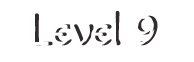
<style>
.page{position:relative;width:194px;height:62px;background:#ffffff}
.page>*{position:absolute;margin:0}
.t1{font:45.6px "Macondo-Regular";color:#312c2c}
</style>
<div class="page">
<p class="t1" style="left:34px;top:10px;width:124px;height:36px">Level 9</p>
</div>
